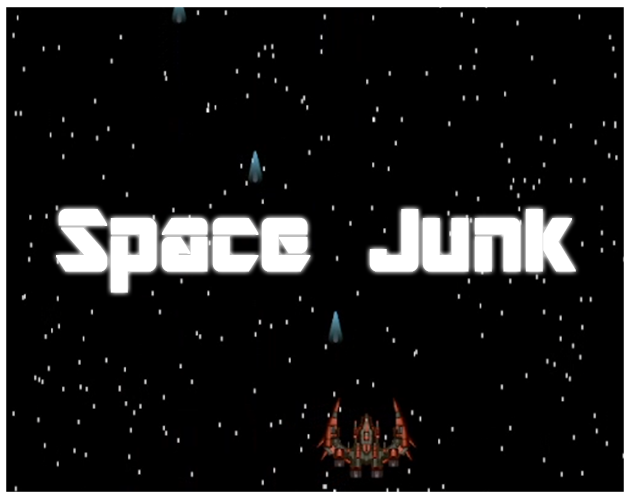
<style>
.page{position:relative;width:630px;height:500px;background:#000000}
.page>*{position:absolute;margin:0}
.t1{font:97px "ARDESTINE";color:#ffffff;font-weight:bold;scale:0.94 1}
</style>
<div class="page">
<p class="t1" style="left:56px;top:209px;width:520px;height:84px">Space Junk</p>
</div>
